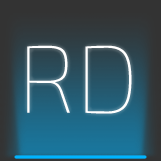
<style>
.page{position:relative;width:161px;height:161px}
.page>*{position:absolute;margin:0}
.t1{font:96px "Exo2-Thin";color:#ffffff}
</style>
<div class="page">
<p class="t1" style="left:27px;top:45px;width:105px;height:69px">RD</p>
</div>
